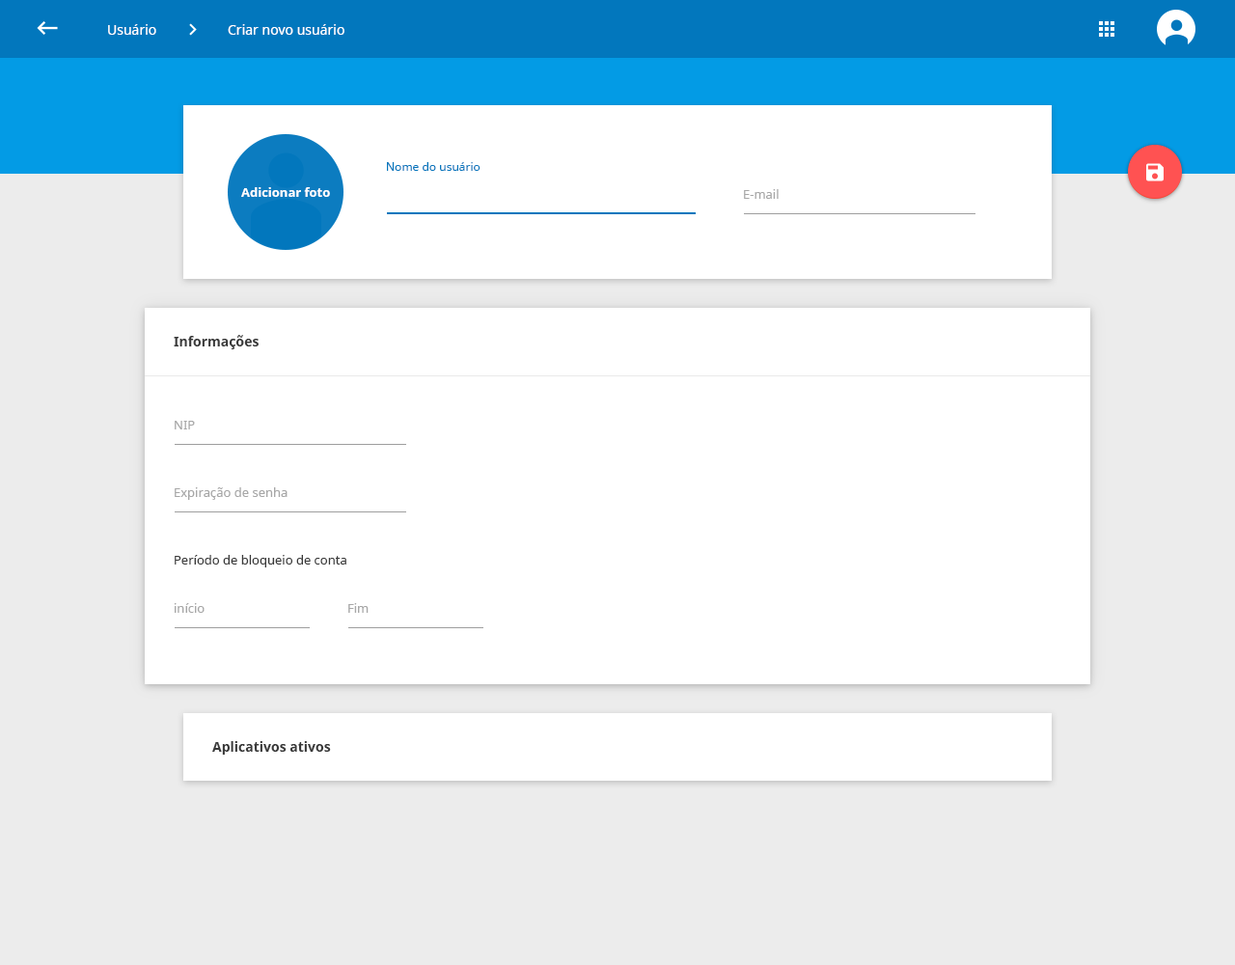
<style>
.page{position:relative;width:1235px;height:965px;background:#ffffff}
.page>*{position:absolute;margin:0}
.t1{font:13.5px "NotoSans";color:#ffffff}
.t2{font:11.6px "NotoSans";color:#0277bd}
.t3{font:12.5px "NotoSans-Bold";color:#ffffff}
.t4{font:12.5px "NotoSans";color:#a7a7a7}
.t5{font:13.5px "NotoSans-Bold";color:#393939}
.t6{font:12.5px "NotoSans";color:#393939}
</style>
<div class="page">
<p class="t1" style="left:108px;top:24px;width:48px;height:11px">Usuário</p>
<p class="t1" style="left:228px;top:24px;width:117px;height:11px">Criar novo usuário</p>
<p class="t2" style="left:387px;top:162px;width:94px;height:9px">Nome do usuário</p>
<p class="t3" style="left:241px;top:187px;width:89px;height:10px">Adicionar foto</p>
<p class="t4" style="left:744px;top:189px;width:35px;height:10px">E-mail</p>
<p class="t5" style="left:174px;top:335px;width:85px;height:14px">Informações</p>
<p class="t4" style="left:175px;top:421px;width:20px;height:9px">NIP</p>
<p class="t4" style="left:175px;top:487px;width:113px;height:13px">Expiração de senha</p>
<p class="t6" style="left:175px;top:555px;width:172px;height:13px">Período de bloqueio de conta</p>
<p class="t4" style="left:174px;top:603px;width:31px;height:10px">início</p>
<p class="t4" style="left:348px;top:603px;width:21px;height:10px">Fim</p>
<p class="t5" style="left:212px;top:741px;width:119px;height:14px">Aplicativos ativos</p>
</div>
